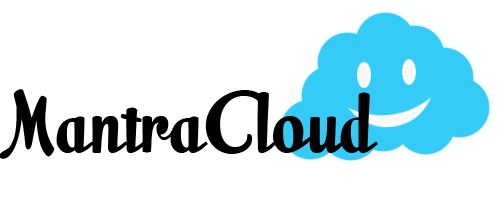
<style>
.page{position:relative;width:500px;height:200px;background:#ffffff}
.page>*{position:absolute;margin:0}
.t1{font:75px "MilkScript";color:#010101}
</style>
<div class="page">
<p class="t1" style="left:0px;top:89px;width:378px;height:70px">MantraCloud</p>
</div>
